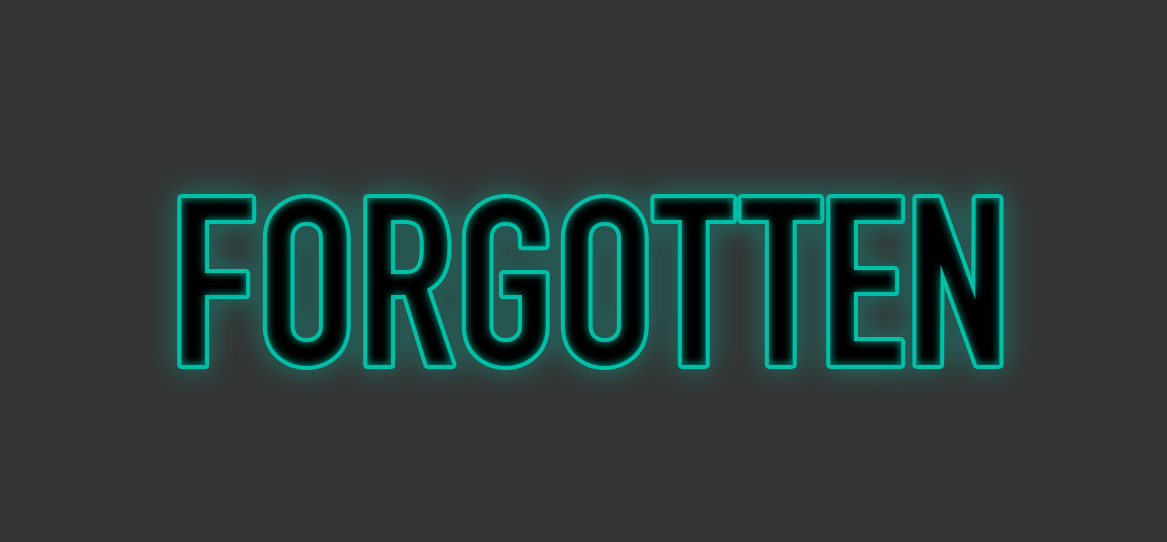
<style>
.page{position:relative;width:1167px;height:542px;background:#333333}
.page>*{position:absolute;margin:0}
.t1{font:233.7px "DINEngschrift";text-transform:uppercase}
</style>
<div class="page">
<p class="t1" style="left:181px;top:198px;width:819px;height:168px">forgotten</p>
</div>
